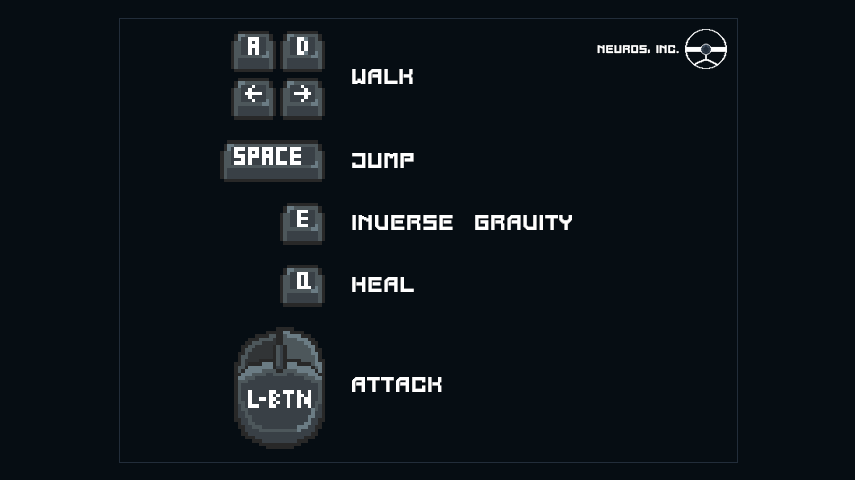
<style>
.page{position:relative;width:855px;height:480px;background:#060d13}
.page>*{position:absolute;margin:0}
.t1{font:11.5px "CyberpunkCraftpixPixel";color:#ffffff}
.t2{font:22px "CyberpunkCraftpixPixel";color:#ffffff}
</style>
<div class="page">
<p class="t1" style="left:597px;top:45px;width:82px;height:9px">NEUROs, Inc.</p>
<p class="t2" style="left:352px;top:69px;width:61px;height:15px">Walk</p>
<p class="t2" style="left:352px;top:153px;width:62px;height:15px">Jump</p>
<p class="t2" style="left:352px;top:215px;width:220px;height:15px">Inverse  Gravity</p>
<p class="t2" style="left:352px;top:277px;width:62px;height:15px">Heal</p>
<p class="t2" style="left:352px;top:377px;width:90px;height:15px">Attack</p>
</div>
